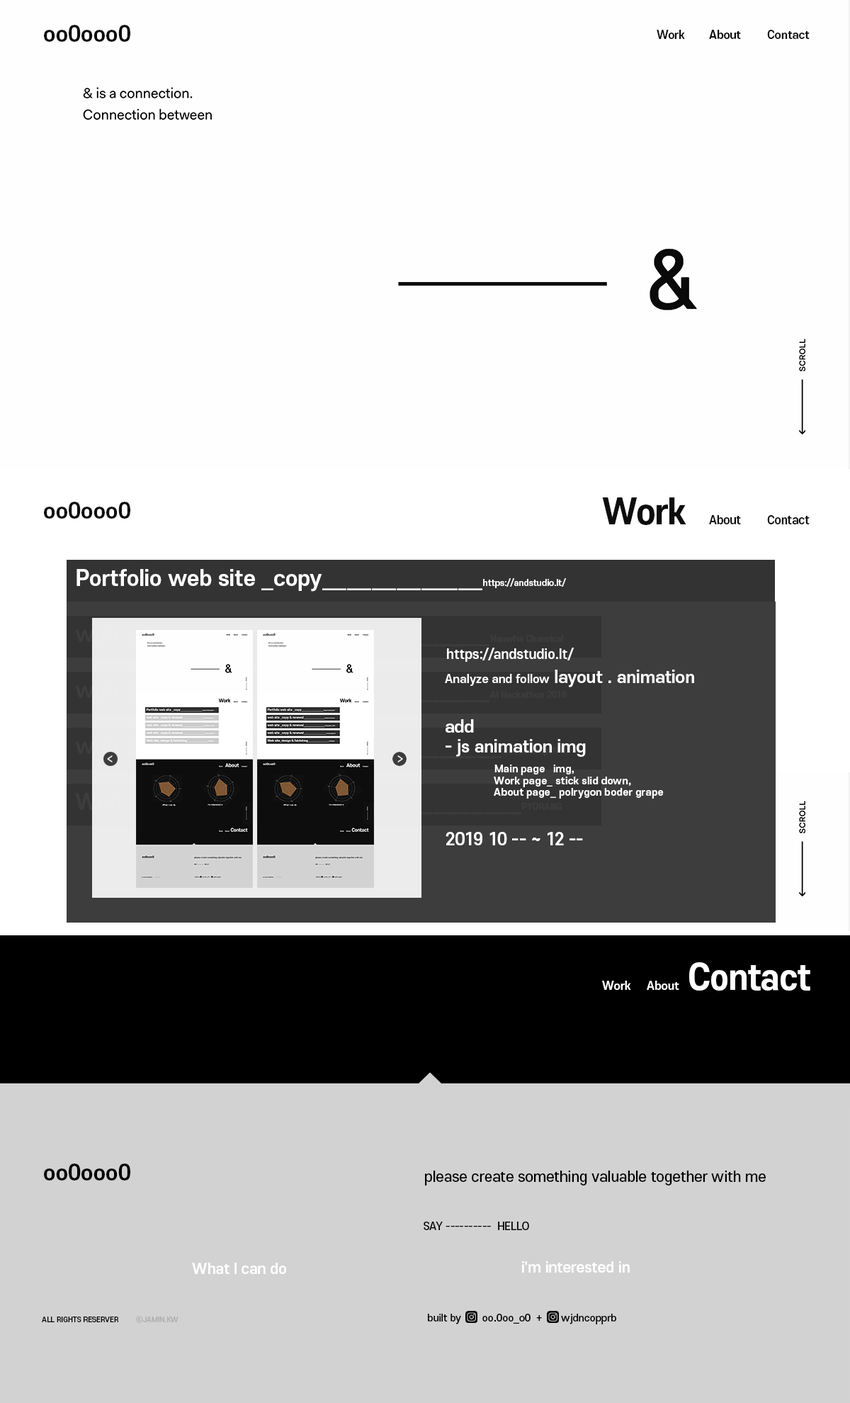
<style>
.page{position:relative;width:850px;height:1403px;background:#fefefe}
.page>*{position:absolute;margin:0}
.t1{font:21.3px "S-CoreDream-6Bold";letter-spacing:-0.01em;color:#0e0d0d}
.t2{font:11.1px "S-CoreDream-6Bold";letter-spacing:-0.01em;color:#0e0d0d}
.t3{font:34px "S-CoreDream-7ExtraBold";letter-spacing:-0.01em;color:#0e0d0d;scale:0.96 1}
.t4{font:11.5px "S-CoreDream-6Bold";letter-spacing:-0.01em;color:#0e0d0d;scale:0.96 1}
.t5{font:21.3px "S-CoreDream-6Bold";letter-spacing:-0.01em;color:#ffffff}
.t6{font:21.3px "S-CoreDream-6Bold";letter-spacing:-0.025em;color:#ffffff}
.t7{font:8.5px "S-CoreDream-6Bold";letter-spacing:-0.01em;color:#ffffff}
.t8{font:12.8px "S-CoreDream-6Bold";letter-spacing:-0.01em;color:#ffffff}
.t9{font:11.3px "S-CoreDream-6Bold";letter-spacing:-0.01em;color:#ffffff}
.t10{font:16.4px "S-CoreDream-6Bold";letter-spacing:-0.01em;color:#ffffff}
.t11{font:9.9px "S-CoreDream-6Bold";letter-spacing:-0.01em;color:#ffffff}
.t12{font:14.2px "S-CoreDream-4Regular";letter-spacing:-0.01em;color:#ffffff;scale:0.7 1}
.t13{font:34px "S-CoreDream-7ExtraBold";letter-spacing:-0.02em;color:#ffffff;scale:0.95 1}
.t14{font:11.2px "S-CoreDream-6Bold";letter-spacing:-0.01em;color:#ffffff}
.t15{font:21.3px "S-CoreDream-6Bold";letter-spacing:-0.01em;color:#000000}
.t16{font:14.2px "S-CoreDream-5Medium";letter-spacing:-0.01em;color:#000000}
.t17{font:10.5px "S-CoreDream-5Medium";letter-spacing:-0.01em;color:#000000}
.t18{font:14.2px "S-CoreDream-6Bold";letter-spacing:-0.01em;color:#ffffff}
.t19{font:9.9px "S-CoreDream-5Medium";letter-spacing:-0.01em;color:#000000}
.t20{font:7.1px "S-CoreDream-5Medium";letter-spacing:-0.01em;color:#000000}
.t21{font:7.1px "S-CoreDream-5Medium";letter-spacing:-0.01em;color:#adadad}
</style>
<div class="page">
<p class="t1" style="left:44px;top:25px;width:86px;height:17px">oo0ooo0</p>
<p class="t2" style="left:657px;top:30px;width:28px;height:9px">Work</p>
<p class="t2" style="left:709px;top:30px;width:32px;height:9px">About</p>
<p class="t2" style="left:767px;top:30px;width:43px;height:9px">Contact</p>
<p class="t3" style="left:602px;top:497px;width:84px;height:28px">Work</p>
<p class="t1" style="left:44px;top:502px;width:86px;height:17px">oo0ooo0</p>
<p class="t4" style="left:709px;top:515px;width:32px;height:9px">About</p>
<p class="t4" style="left:767px;top:515px;width:43px;height:9px">Contact</p>
<p class="t5" style="left:77px;top:569px;width:489px;height:23px">Portfolio web site _copy<span class="t6">_____________</span><span class="t7">https://andstudio.lt/</span></p>
<p class="t8" style="left:447px;top:648px;width:128px;height:14px">https://andstudio.lt/</p>
<p class="t9" style="left:445px;top:669px;width:249px;height:18px">Analyze and follow<span class="t10"> layout . animation</span></p>
<p class="t11" style="left:446px;top:719px;width:218px;height:79px"><span class="t10">add <br>- js animation img <br> </span>Main page   img, <br> Work page_ stick slid down,<br> About page_ polrygon boder grape</p>
<p class="t12" style="left:107px;top:755px;width:6px;height:7px">&lt;</p>
<p class="t12" style="left:397px;top:755px;width:6px;height:7px">&gt;</p>
<p class="t10" style="left:446px;top:832px;width:137px;height:13px">2019 10 -- ~ 12 --</p>
<p class="t13" style="left:689px;top:962px;width:121px;height:28px">Contact</p>
<p class="t14" style="left:602px;top:980px;width:29px;height:10px">Work</p>
<p class="t14" style="left:647px;top:980px;width:32px;height:10px">About</p>
<p class="t15" style="left:44px;top:1163px;width:86px;height:17px">oo0ooo0</p>
<p class="t16" style="left:425px;top:1170px;width:341px;height:15px">please create something valuable together with me</p>
<p class="t17" style="left:424px;top:1221px;width:105px;height:9px">SAY ----------  HELLO</p>
<p class="t18" style="left:192px;top:1262px;width:94px;height:12px">What I can do</p>
<p class="t18" style="left:522px;top:1261px;width:108px;height:11px">i'm interested in</p>
<p class="t19" style="left:428px;top:1313px;width:33px;height:11px">built by</p>
<p class="t19" style="left:482px;top:1313px;width:134px;height:11px">oo.0oo_o0  +       wjdncopprb</p>
<p class="t20" style="left:42px;top:1316px;width:76px;height:6px">ALL RIGHTS RESERVER</p>
<p class="t21" style="left:136px;top:1316px;width:43px;height:7px">ⓒJAMIN.KW</p>
</div>
